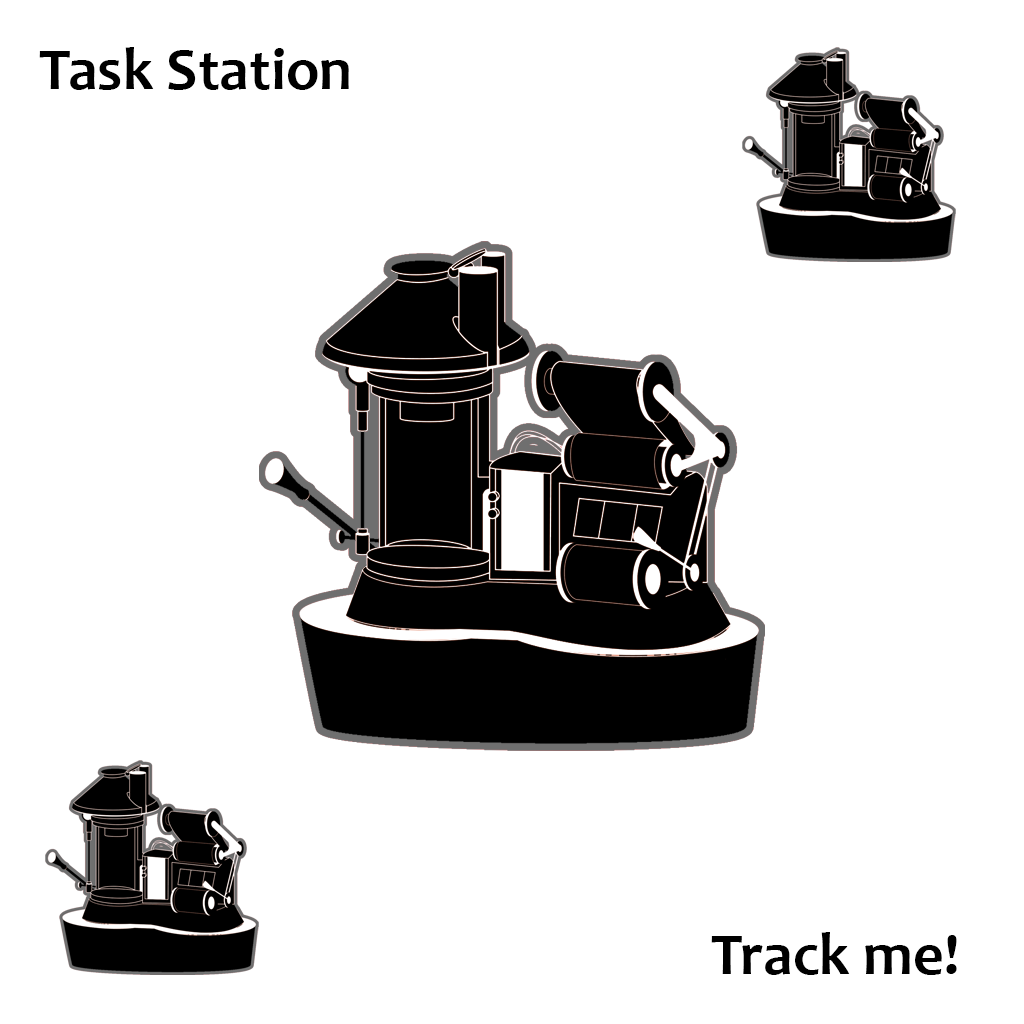
<style>
.page{position:relative;width:1024px;height:1024px;background:#ffffff}
.page>*{position:absolute;margin:0}
.t1{font:60px "Candara-Bold";color:#000000}
</style>
<div class="page">
<p class="t1" style="left:39px;top:47px;width:310px;height:43px">Task Station</p>
<p class="t1" style="left:711px;top:932px;width:246px;height:43px">Track me!</p>
</div>
